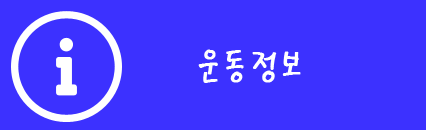
<style>
.page{position:relative;width:426px;height:130px;background:#3c31ff}
.page>*{position:absolute;margin:0}
.t1{font:37px "PyunjiR-HM";color:#fefefe;font-weight:bold;scale:0.97 1}
</style>
<div class="page">
<p class="t1" style="left:198px;top:49px;width:103px;height:34px">운동정보</p>
</div>
